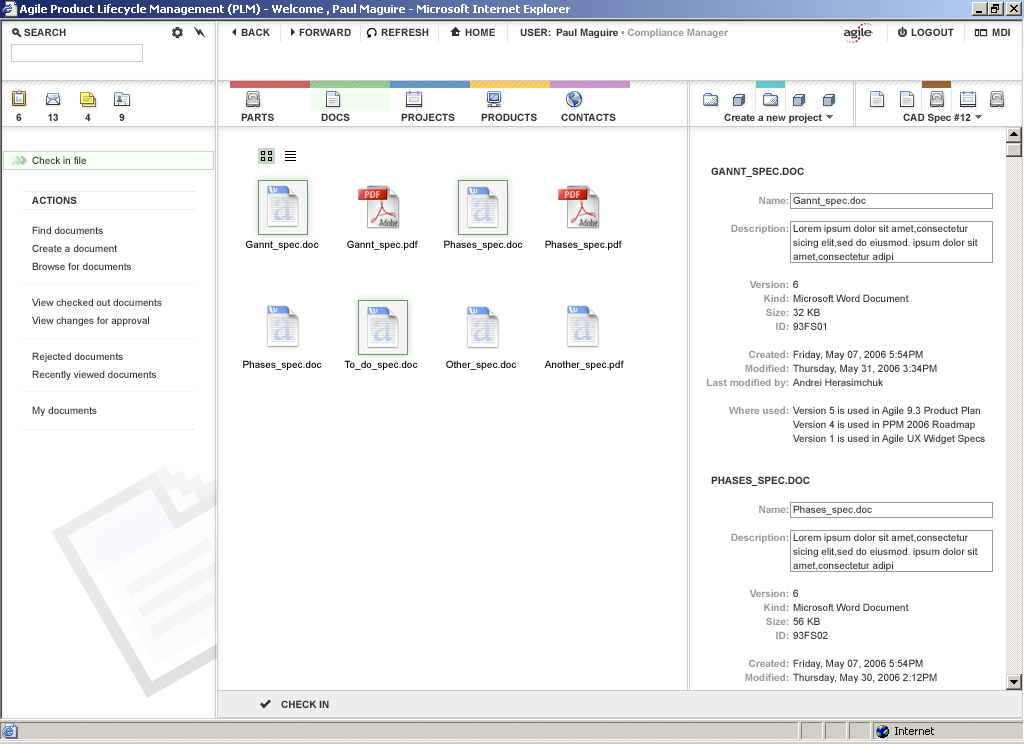
<style>
.page{position:relative;width:1024px;height:744px;background:#ffffff}
.page>*{position:absolute;margin:0}
.t1{font:10px "Arial-BoldMT";color:#333333}
.t2{font:10px "Arial-BoldMT";color:#999999}
.t3{font:10px "ArialMT";color:#333333}
.t4{font:10px "Arial-BoldMT";color:#333333;text-transform:uppercase}
.t5{font:10px/14px "Arial-BoldMT";color:#999999}
.t6{font:10px/14px "ArialMT";color:#333333}
.t7{font:10px/18px "ArialMT";color:#333333}
.t8{font:10px "ArialMT";color:#000000}
</style>
<div class="page">
<p class="t1" style="left:24px;top:28px;width:42px;height:8px">SEARCH</p>
<p class="t1" style="left:241px;top:28px;width:29px;height:8px">BACK</p>
<p class="t1" style="left:299px;top:28px;width:52px;height:8px">FORWARD</p>
<p class="t1" style="left:381px;top:28px;width:48px;height:8px">REFRESH</p>
<p class="t1" style="left:465px;top:28px;width:30px;height:8px">HOME</p>
<p class="t2" style="left:520px;top:28px;width:209px;height:10px"><span class="t1">USER: Paul Maguire </span>• Compliance Manager</p>
<p class="t1" style="left:911px;top:28px;width:43px;height:8px">LOGOUT</p>
<p class="t1" style="left:992px;top:28px;width:18px;height:8px">MDI</p>
<p class="t1" style="left:16px;top:113px;width:6px;height:8px">6</p>
<p class="t1" style="left:48px;top:113px;width:10px;height:8px">13</p>
<p class="t1" style="left:85px;top:113px;width:6px;height:8px">4</p>
<p class="t1" style="left:119px;top:113px;width:6px;height:8px">9</p>
<p class="t1" style="left:241px;top:113px;width:33px;height:8px">PARTS</p>
<p class="t1" style="left:321px;top:113px;width:29px;height:8px">DOCS</p>
<p class="t1" style="left:401px;top:113px;width:54px;height:8px">PROJECTS</p>
<p class="t1" style="left:481px;top:113px;width:56px;height:8px">PRODUCTS</p>
<p class="t1" style="left:561px;top:113px;width:55px;height:8px">CONTACTS</p>
<p class="t1" style="left:724px;top:113px;width:98px;height:10px">Create a new project</p>
<p class="t1" style="left:903px;top:113px;width:68px;height:10px">CAD Spec #12</p>
<p class="t3" style="left:32px;top:156px;width:54px;height:8px">Check in file</p>
<p class="t4" style="left:711px;top:167px;width:93px;height:10px">Gannt_spec.doc</p>
<p class="t1" style="left:32px;top:196px;width:45px;height:8px">ACTIONS</p>
<p class="t5" style="left:707px;top:196px;width:82px;height:218px;text-align:right">Name:<br><br>Description:<br><br><br><br>Version:<br>Kind:<br>Size:<br>ID:<br><br>Created:<br>Modified:<br>Last modified by:<br><br>Where used:</p>
<p class="t6" style="left:793px;top:196px;width:192px;height:248px">Gannt_spec.doc<br><br>Lorem ipsum dolor sit amet,consectetur <br>sicing elit,sed do eiusmod. ipsum dolor sit<br>amet,consectetur adipi <br><br>6<br>Microsoft Word Document<br>32 KB<br>93FS01<br><br>Friday, May 07, 2006 5:54PM<br>Thursday, May 31, 2006 3:34PM<br>Andrei Herasimchuk<br><br>Version 5 is used in Agile 9.3 Product Plan<br>Version 4 is used in PPM 2006 Roadmap<br>Version 1 is used in Agile UX Widget Specs</p>
<p class="t7" style="left:32px;top:226px;width:130px;height:190px">Find documents<br>Create a document<br>Browse for documents<br><br>View checked out documents<br>View changes for approval<br><br>Rejected documents<br>Recently viewed documents<br><br>My documents</p>
<p class="t8" style="left:246px;top:240px;width:73px;height:10px">Gannt_spec.doc</p>
<p class="t8" style="left:347px;top:240px;width:71px;height:10px">Gannt_spec.pdf</p>
<p class="t8" style="left:444px;top:240px;width:79px;height:10px">Phases_spec.doc</p>
<p class="t8" style="left:545px;top:240px;width:77px;height:10px">Phases_spec.pdf</p>
<p class="t8" style="left:243px;top:360px;width:79px;height:10px">Phases_spec.doc</p>
<p class="t8" style="left:344px;top:360px;width:74px;height:10px">To_do_spec.doc</p>
<p class="t8" style="left:446px;top:360px;width:70px;height:10px">Other_spec.doc</p>
<p class="t8" style="left:544px;top:360px;width:80px;height:10px">Another_spec.pdf</p>
<p class="t4" style="left:711px;top:476px;width:99px;height:10px">phases_spec.doc</p>
<p class="t5" style="left:731px;top:505px;width:58px;height:176px;text-align:right">Name:<br><br>Description:<br><br><br><br>Version:<br>Kind:<br>Size:<br>ID:<br><br>Created:<br>Modified:</p>
<p class="t6" style="left:793px;top:505px;width:185px;height:178px">Phases_spec.doc<br><br>Lorem ipsum dolor sit amet,consectetur <br>sicing elit,sed do eiusmod. ipsum dolor sit<br>amet,consectetur adipi <br><br>6<br>Microsoft Word Document<br>56 KB<br>93FS02<br><br>Friday, May 07, 2006 5:54PM<br>Thursday, May 30, 2006 2:12PM</p>
<p class="t1" style="left:281px;top:700px;width:48px;height:8px">CHECK IN</p>
</div>
